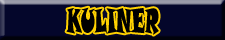
<style>
.page{position:relative;width:225px;height:40px;background:#04062b}
.page>*{position:absolute;margin:0}
.t1{font:33.3px "SnapITC-Regular";color:#000000;scale:0.5 1}
</style>
<div class="page">
<p class="t1" style="left:66px;top:7px;width:93px;height:28px">KULINER</p>
</div>
